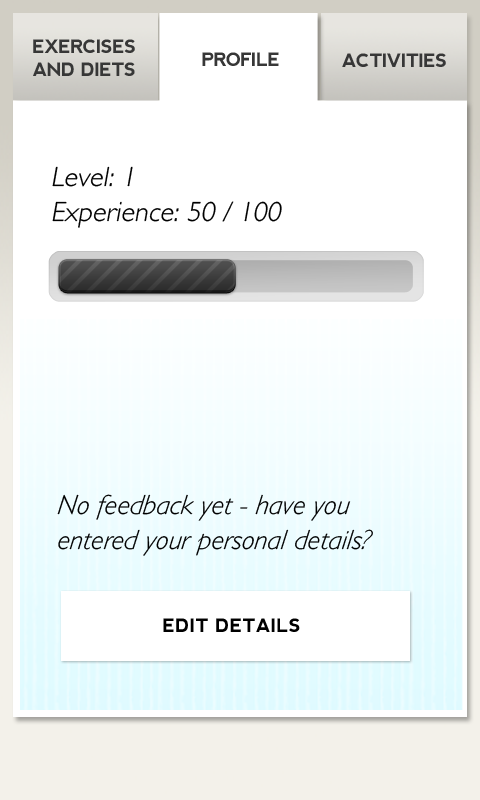
<style>
.page{position:relative;width:480px;height:800px;background:#ffffff}
.page>*{position:absolute;margin:0}
.t1{font:18.4px/22.7px "nevis-Bold";letter-spacing:-0.03em;color:#373737}
.t2{font:18.4px "nevis-Bold";letter-spacing:-0.03em;color:#373737}
.t3{font:27.7px/35px "GillSans-Light";letter-spacing:0.01em;color:#000000;font-style:italic}
.t4{font:27.7px/35px "GillSans-LightItalic";letter-spacing:0.01em;color:#000000;font-style:italic}
.t5{font:18.4px "nevis-Bold";letter-spacing:0.01em;color:#000000}
</style>
<div class="page">
<p class="t1" style="left:33px;top:39px;width:102px;height:37px;text-align:center">EXERCISES<br>AND DIETS</p>
<p class="t2" style="left:202px;top:52px;width:77px;height:14px">PROFILE</p>
<p class="t2" style="left:342px;top:53px;width:104px;height:14px">ACTIVITIES</p>
<p class="t3" style="left:52px;top:166px;width:230px;height:62px">Level: 1<br>Experience: 50 / 100</p>
<p class="t4" style="left:57px;top:494px;width:316px;height:62px">No feedback yet - have you <br>entered your personal details?</p>
<p class="t5" style="left:163px;top:618px;width:137px;height:14px">EDIT DETAILS</p>
</div>
